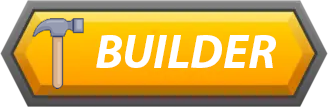
<style>
.page{position:relative;width:328px;height:107px}
.page>*{position:absolute;margin:0}
.t1{font:48px "MyriadPro-BoldIt";color:#ffffff}
</style>
<div class="page">
<p class="t1" style="left:96px;top:35px;width:180px;height:33px">BUILDER</p>
</div>
